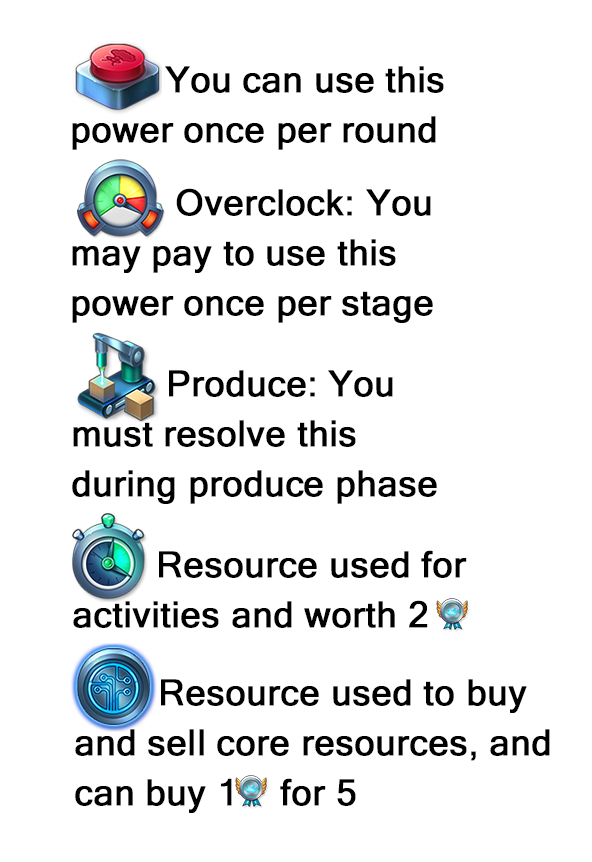
<style>
.page{position:relative;width:592px;height:862px;background:#ffffff}
.page>*{position:absolute;margin:0}
.t1{font:36px/50px "MicrosoftSansSerif";color:#000000;font-weight:bold}
.t2{font:36px/72px "MicrosoftSansSerif";color:#000000;font-weight:bold}
</style>
<div class="page">
<p class="t1" style="left:72px;top:66px;width:372px;height:84px"><span class="t2">         </span>You can use this <br>power once per round</p>
<p class="t1" style="left:72px;top:188px;width:361px;height:135px"><span class="t2">          </span>Overclock: You <br>may pay to use this <br>power once per stage</p>
<p class="t1" style="left:72px;top:370px;width:365px;height:134px">Produce: You <br>must resolve this <br>during produce phase</p>
<p class="t1" style="left:73px;top:550px;width:394px;height:78px">Resource used for <br>activities and worth 2</p>
<p class="t1" style="left:75px;top:679px;width:475px;height:134px">Resource used to buy <br>and sell core resources, and <br>can buy 1    for 5</p>
</div>
